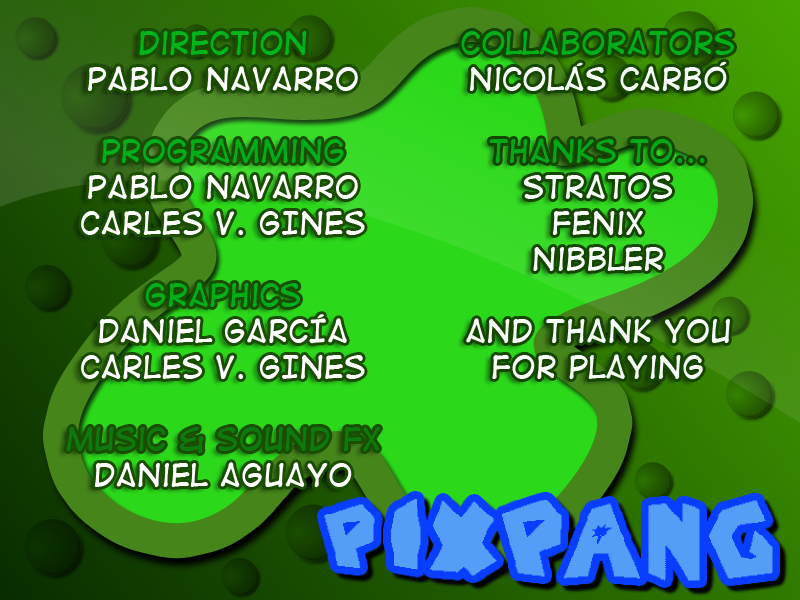
<style>
.page{position:relative;width:800px;height:600px}
.page>*{position:absolute;margin:0}
.t1{font:30px "DigitalStrip2";color:#f8fcf8}
.t2{font:30px "DigitalStrip2";color:#02ae18}
.t3{font:30px "DigitalStrip2";color:#04a816}
.t4{font:30px "DigitalStrip2";color:#ffffff}
.t5{font:30px "DigitalStrip2";color:#00b51a}
.t6{font:30px "DigitalStrip2";color:#0e7a0b}
</style>
<div class="page">
<p class="t1" style="left:461px;top:30px;width:273px;height:349px;text-align:center"><span class="t2">collaborators<br></span>nicolás carbó<br><br><span class="t3">thanks to...<br></span>Stratos<br>fenix<br>nibbler<br><br>And thank you <br>for playing</p>
<p class="t4" style="left:66px;top:31px;width:314px;height:456px;text-align:center"><span class="t5">direction<br></span>PABLO NAVARRO<br><br><span class="t2">programming<br></span>pABLO nAVARRO<br>cARLES v. gINES<br><br><span class="t2">graphics<br></span>Daniel García<br>CARLES V. GINES<br><br><span class="t6">music &amp; sound fx<br></span>Daniel Aguayo</p>
</div>
